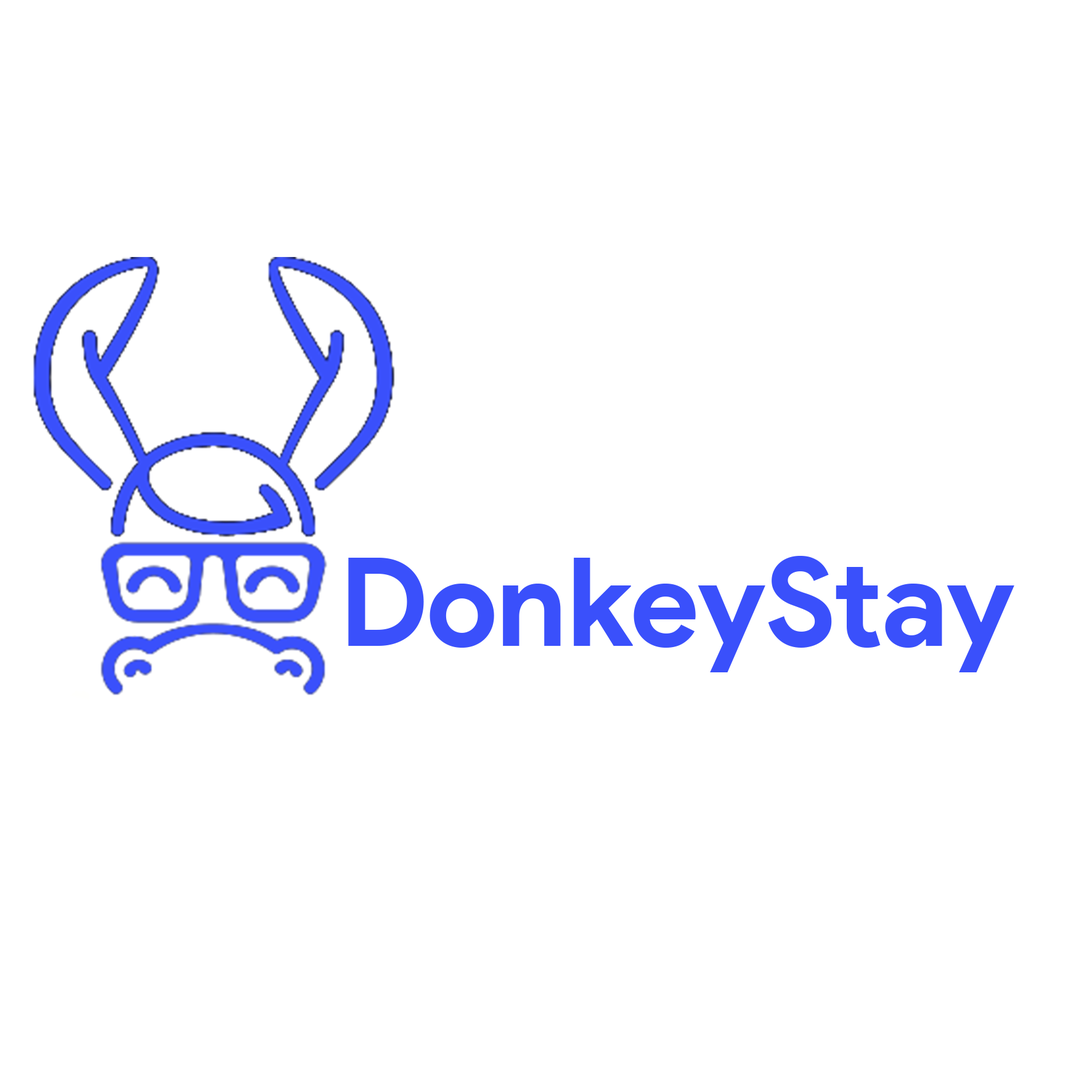
<style>
.page{position:relative;width:1092px;height:1092px;background:#ffffff}
.page>*{position:absolute;margin:0}
.t1{font:123.2px "ProductSans-Bold";color:#3a50fb}
</style>
<div class="page">
<p class="t1" style="left:348px;top:556px;width:666px;height:116px">DonkeyStay</p>
</div>
